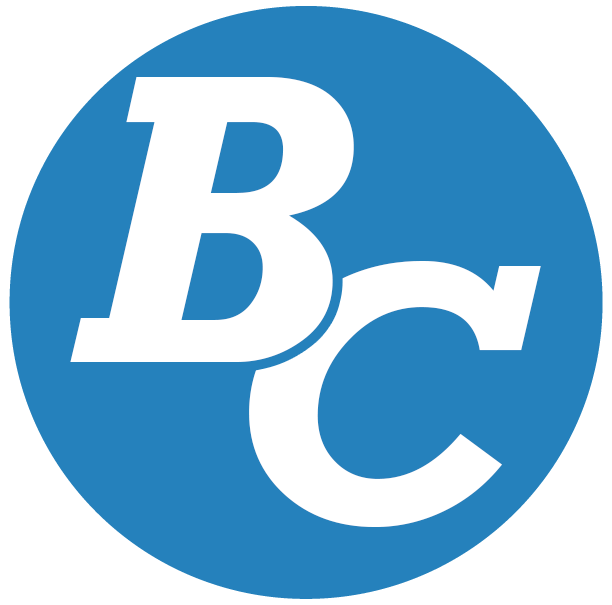
<style>
.page{position:relative;width:612px;height:605px;background:#2581bc}
.page>*{position:absolute;margin:0}
.t1{font:420px "Rockwell-BoldItalic";color:#ffffff}
.t2{font:380px "Rockwell-BoldItalic";color:#ffffff}
</style>
<div class="page">
<p class="t1" style="left:70px;top:77px;width:284px;height:285px">B</p>
<p class="t2" style="left:249px;top:261px;width:292px;height:266px">C</p>
</div>
